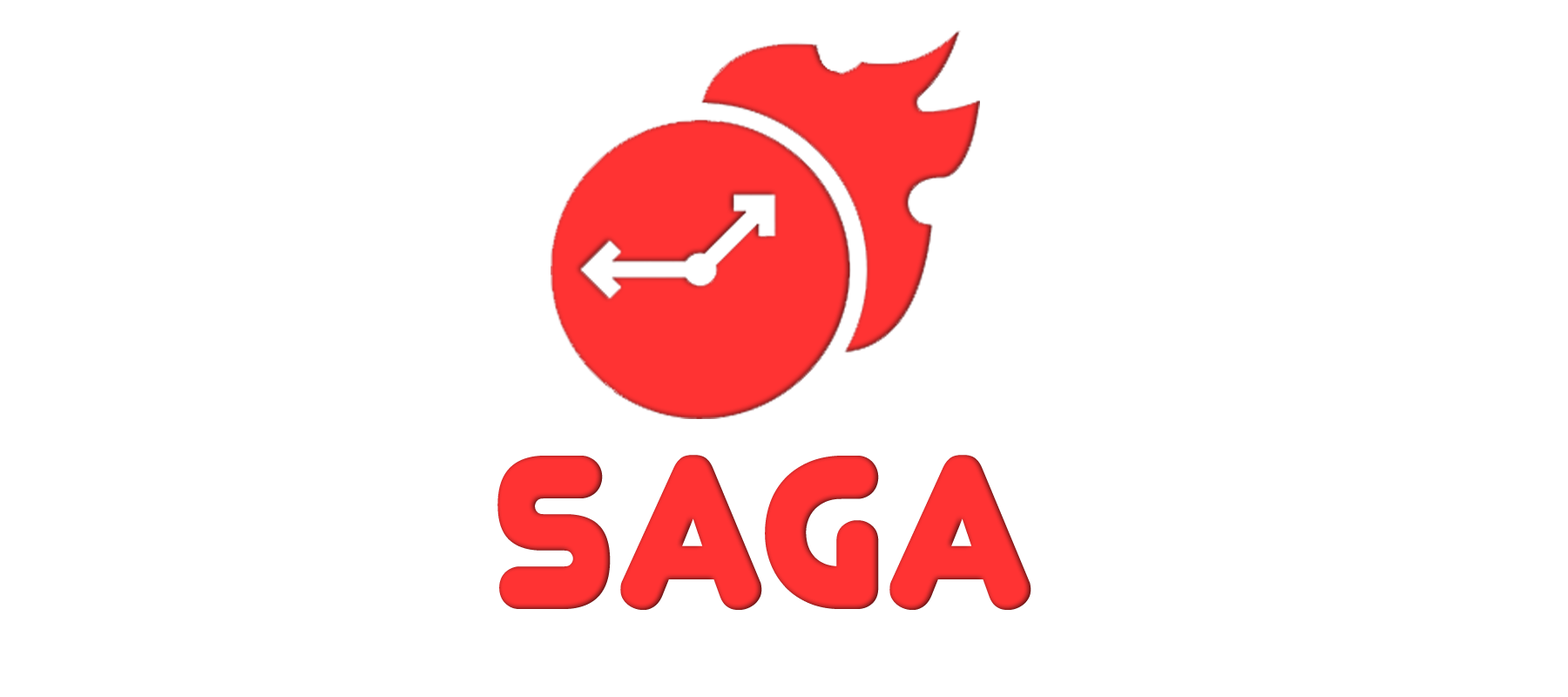
<style>
.page{position:relative;width:1568px;height:697px;background:#ffffff}
.page>*{position:absolute;margin:0}
.t1{font:217.8px "Junegull-Regular";color:#ff3333}
</style>
<div class="page">
<p class="t1" style="left:497px;top:455px;width:534px;height:155px">SAGA</p>
</div>
